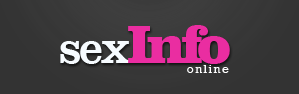
<style>
.page{position:relative;width:299px;height:94px;background:#333333}
.page>*{position:absolute;margin:0}
.t1{font:45px "ClarendonBT-Roman";letter-spacing:-0.05em;color:#f6fbff}
.t2{font:55px "ClarendonBT-Black";letter-spacing:-0.08em;color:#ea2da1}
.t3{font:55px "ClarendonBT-Black";letter-spacing:-0.1em;color:#ea2da1}
.t4{font:55px "ClarendonBT-Black";letter-spacing:-0.05em;color:#ea2da1}
.t5{font:12px "Rockwell";letter-spacing:0.125em;color:#ffffff}
</style>
<div class="page">
<p class="t1" style="left:60px;top:25px;width:170px;height:39px">sex<span class="t2">In</span><span class="t3">f</span><span class="t4">o</span></p>
<p class="t5" style="left:187px;top:65px;width:42px;height:8px">online</p>
</div>
